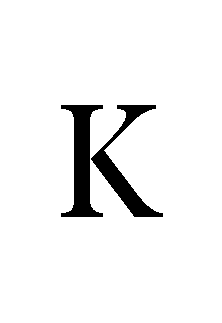
<style>
.page{position:relative;width:222px;height:323px;background:#ffffff}
.page>*{position:absolute;margin:0}
.t1{font:180px "FootlightMTLight";color:#000000}
</style>
<div class="page">
<p class="t1" style="left:61px;top:105px;width:102px;height:112px">K</p>
</div>
